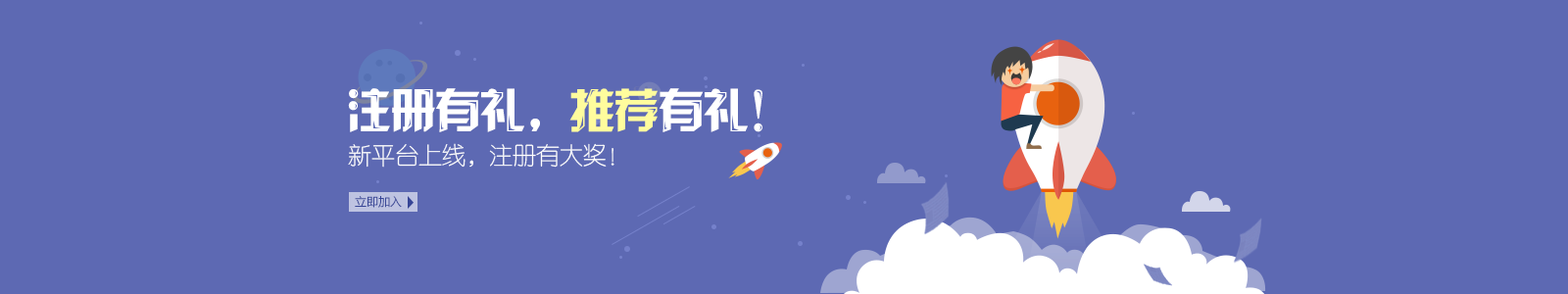
<style>
.page{position:relative;width:1568px;height:294px;background:#5d69b3}
.page>*{position:absolute;margin:0}
.t1{font:47px "JLinXin";letter-spacing:-0.05em;color:#ffffff}
.t2{font:47px "JLinXin";letter-spacing:-0.05em;color:#fffc9d}
.t3{font:23.5px "FZY1JW--GB1-0";color:#ffffff}
.t4{font:11.8px "MicrosoftYaHei";color:#374596}
</style>
<div class="page">
<p class="t1" style="left:348px;top:88px;width:414px;height:44px">注册有礼，<span class="t2">推荐</span>有礼！</p>
<p class="t3" style="left:348px;top:143px;width:266px;height:25px">新平台上线，注册有大奖！</p>
<p class="t4" style="left:355px;top:196px;width:47px;height:12px">立即加入</p>
</div>
